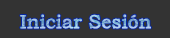
<style>
.page{position:relative;width:170px;height:38px;background:#333333}
.page>*{position:absolute;margin:0}
.t1{font:18.7px "BookmanOldStyle";font-weight:bold}
</style>
<div class="page">
<p class="t1" style="left:20px;top:14px;width:131px;height:15px">Iniciar Sesión</p>
</div>
